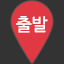
<style>
.page{position:relative;width:64px;height:64px;background:#333333}
.page>*{position:absolute;margin:0}
.t1{font:17.5px "NanumBarunGothicOTF";color:#ffffff}
</style>
<div class="page">
<p class="t1" style="left:16px;top:16px;width:32px;height:17px">출발</p>
</div>
